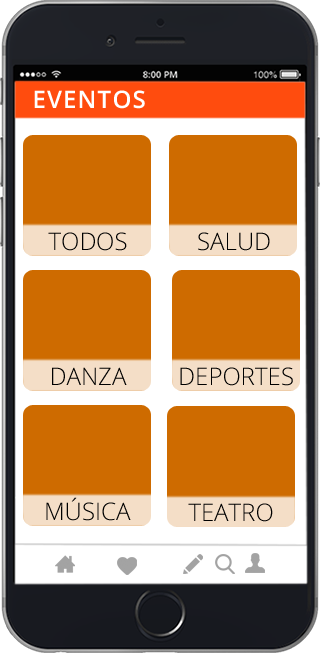
<style>
.page{position:relative;width:320px;height:653px;background:#ce6b00}
.page>*{position:absolute;margin:0}
.t1{font:24px "OpenSans-Semibold";letter-spacing:0.05em;color:#ffffff;text-transform:uppercase}
.t2{font:24px "OpenSans-Light";color:#000000}
</style>
<div class="page">
<p class="t1" style="left:34px;top:90px;width:111px;height:19px">EVENTOS</p>
<p class="t2" style="left:48px;top:232px;width:79px;height:19px">TODOS</p>
<p class="t2" style="left:198px;top:232px;width:72px;height:19px">SALUD</p>
<p class="t2" style="left:52px;top:367px;width:75px;height:18px">DANZA</p>
<p class="t2" style="left:180px;top:367px;width:113px;height:19px">DEPORTES</p>
<p class="t2" style="left:46px;top:497px;width:85px;height:24px">MÚSICA</p>
<p class="t2" style="left:188px;top:503px;width:85px;height:19px">TEATRO</p>
</div>
